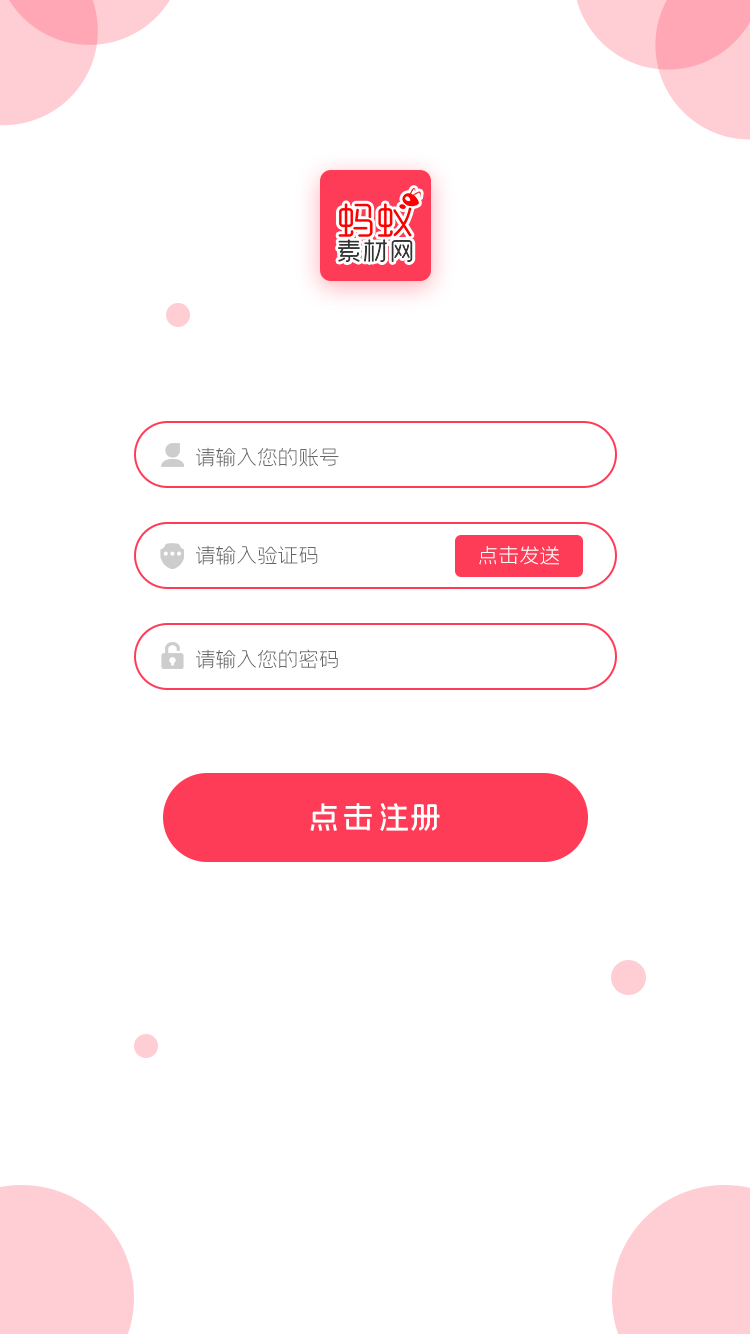
<style>
.page{position:relative;width:750px;height:1334px;background:#ffffff}
.page>*{position:absolute;margin:0}
.t1{font:24px "58--Regular";letter-spacing:-0.14em;color:#666666;text-transform:uppercase}
.t2{font:24px "58--Regular";letter-spacing:-0.14em;color:#ffffff;text-transform:uppercase}
.t3{font:36px "59--Regular";letter-spacing:-0.06em;color:#ffffff;text-transform:uppercase}
</style>
<div class="page">
<p class="t1" style="left:196px;top:447px;width:143px;height:20px">请输入您的账号</p>
<p class="t1" style="left:196px;top:545px;width:122px;height:20px">请输入验证码</p>
<p class="t2" style="left:479px;top:546px;width:80px;height:19px">点击发送</p>
<p class="t1" style="left:196px;top:649px;width:142px;height:20px">请输入您的密码</p>
<p class="t3" style="left:310px;top:803px;width:130px;height:28px">点击注册</p>
</div>
